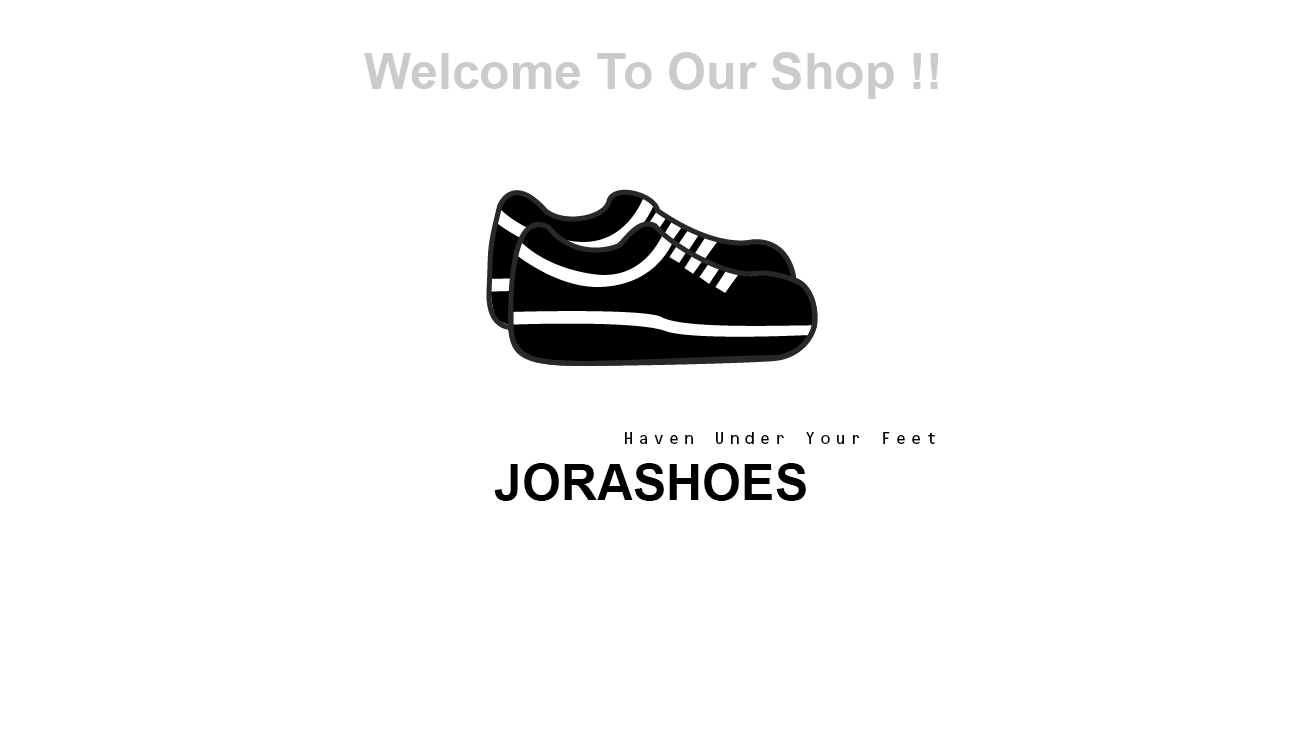
<style>
.page{position:relative;width:1300px;height:750px;background:#ffffff}
.page>*{position:absolute;margin:0}
.t1{font:50px "Arial-BoldMT";color:#cbcbcb}
.t2{font:16.5px "OCRBStd";letter-spacing:0.2em;color:#000000}
.t3{font:50px "Arial-BoldMT";color:#000000}
</style>
<div class="page">
<p class="t1" style="left:364px;top:52px;width:574px;height:47px">Welcome To Our Shop !!</p>
<p class="t2" style="left:625px;top:432px;width:310px;height:12px">Haven Under Your Feet</p>
<p class="t3" style="left:494px;top:463px;width:312px;height:38px">JORASHOES</p>
</div>
